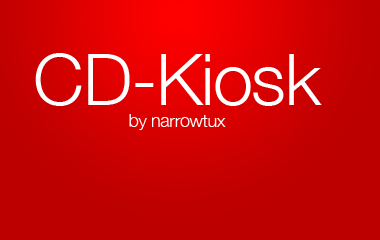
<style>
.page{position:relative;width:380px;height:240px;background:#bc0000}
.page>*{position:absolute;margin:0}
.t1{font:18px "HelveticaNeue-Light";letter-spacing:-0.02em;color:#ffffff}
.t2{font:72px "HelveticaNeue-Light";letter-spacing:-0.02em;color:#ffffff}
</style>
<div class="page">
<p class="t1" style="left:35px;top:53px;width:287px;height:77px;text-align:center"><span class="t2">CD-Kiosk<br></span>by narrowtux</p>
</div>
